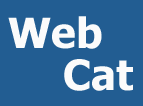
<style>
.page{position:relative;width:143px;height:106px;background:#225d92}
.page>*{position:absolute;margin:0}
.t1{font:41.7px "Tahoma-Bold";color:#fbfbfb}
</style>
<div class="page">
<p class="t1" style="left:8px;top:16px;width:94px;height:33px">Web</p>
<p class="t1" style="left:64px;top:59px;width:69px;height:32px">Cat</p>
</div>
